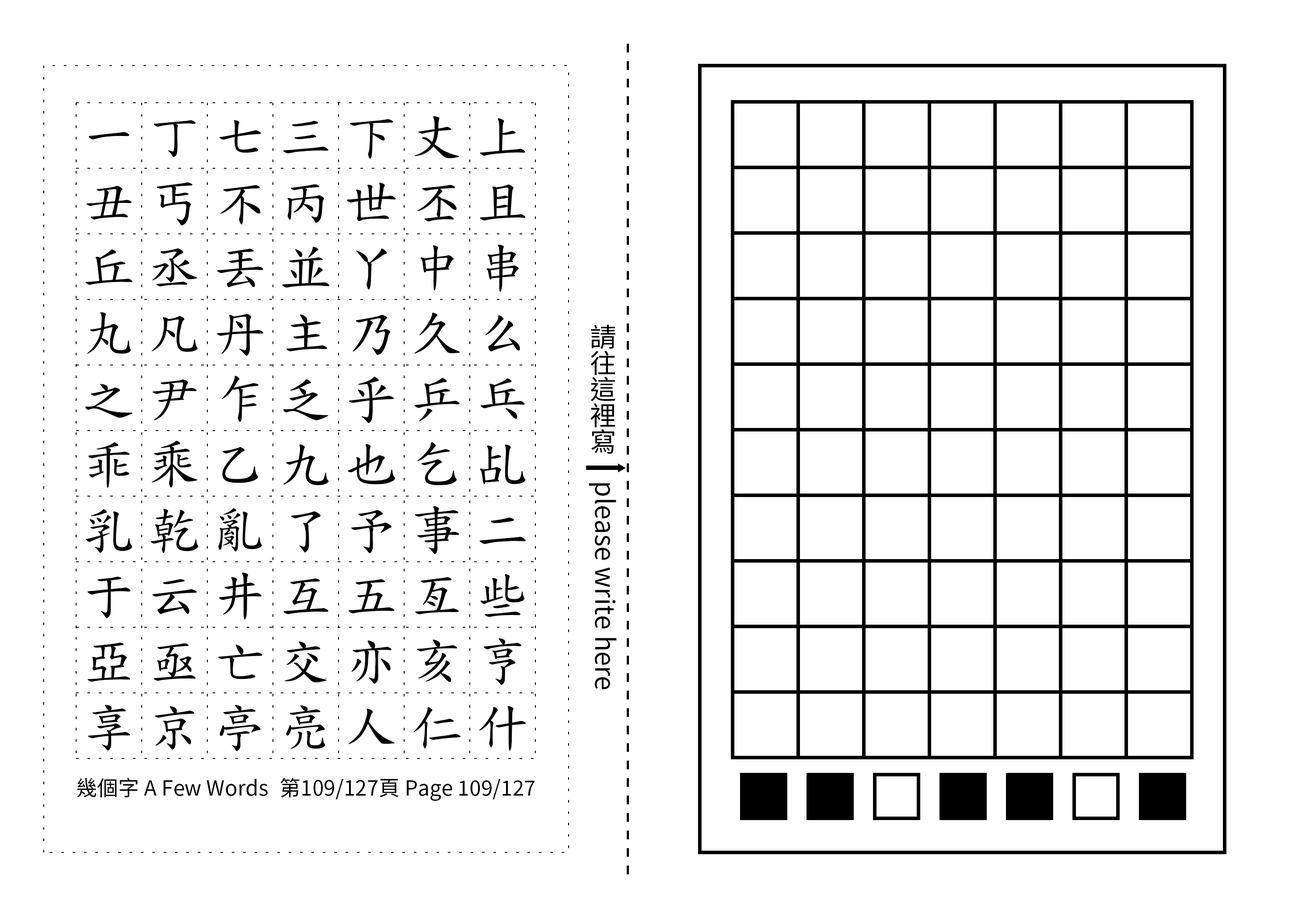
<style>
.page{position:relative;width:1299px;height:918px;background:#ffffff}
.page>*{position:absolute;margin:0}
.t1{font:52.5px/65.6px "TW-Kai-98_1";letter-spacing:0.25em;color:#000000}
.t2{font:26.2px "SourceHanSansTC-Regular";color:#000000}
.t3{font:21px "SourceHanSansTC-Regular";color:#000000}
</style>
<div class="page">
<p class="t1" style="left:85px;top:116px;width:441px;height:636px;text-align:center">一丁七三下丈上丑丐不丙世丕且丘丞丟並丫中串丸凡丹主乃久么之尹乍乏乎乒乓乖乘乙九也乞乩乳乾亂了予事二于云井互五亙些亞亟亡交亦亥亨享京亭亮人仁什</p>
<p class="t2" style="left:589px;top:324px;width:28px;height:366px;text-align:center">請往這裡寫　please write here</p>
<p class="t3" style="left:77px;top:778px;width:191px;height:20px">幾個字 A Few Words</p>
<p class="t3" style="left:280px;top:778px;width:255px;height:23px">第109/127頁 Page 109/127</p>
</div>
